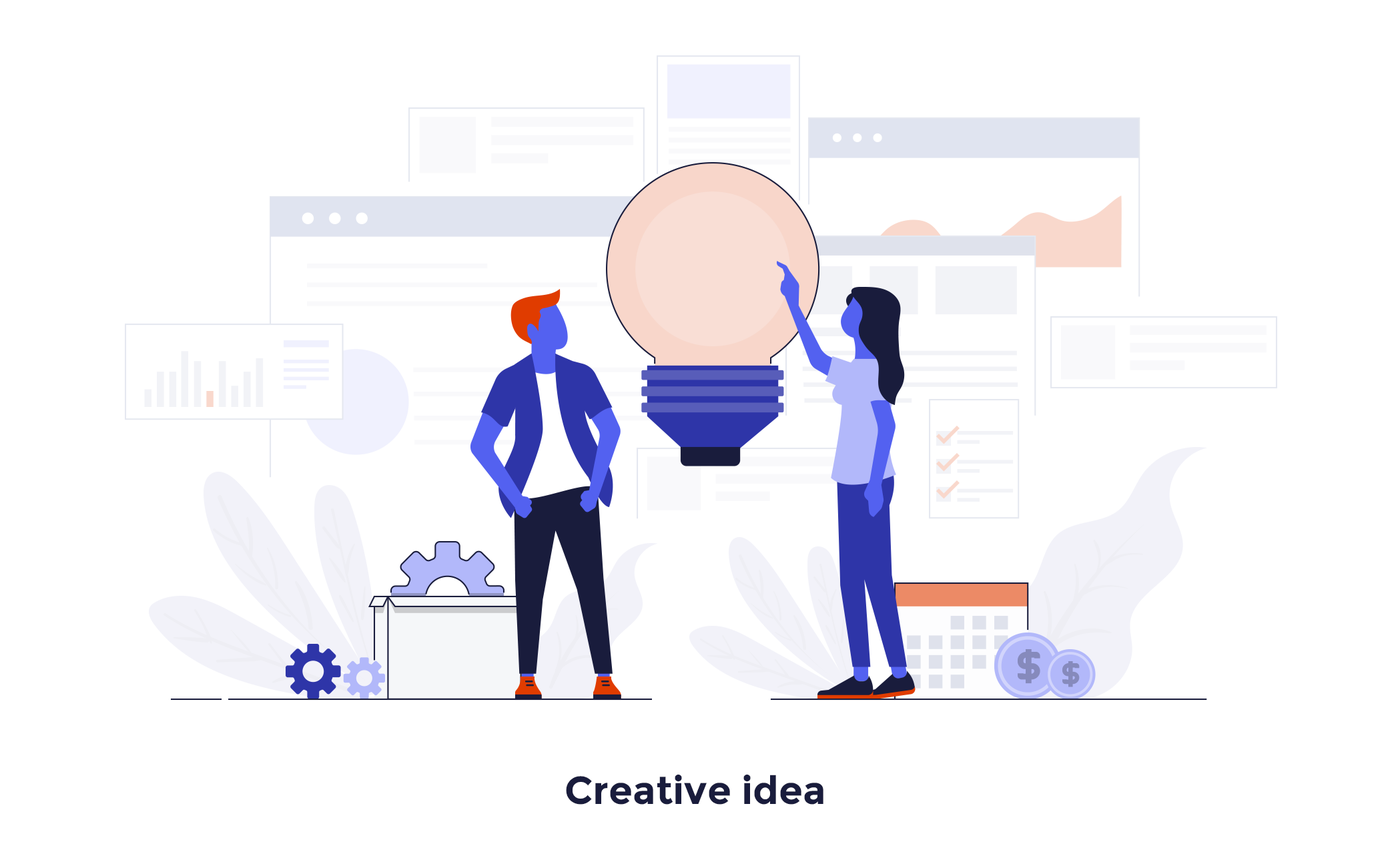
<style>
.page{position:relative;width:1390px;height:858px;background:#ffffff}
.page>*{position:absolute;margin:0}
.t1{font:38.9px "Montserrat-Bold";color:#191c3c}
</style>
<div class="page">
<p class="t1" style="left:566px;top:775px;width:257px;height:30px">Creative idea</p>
</div>
